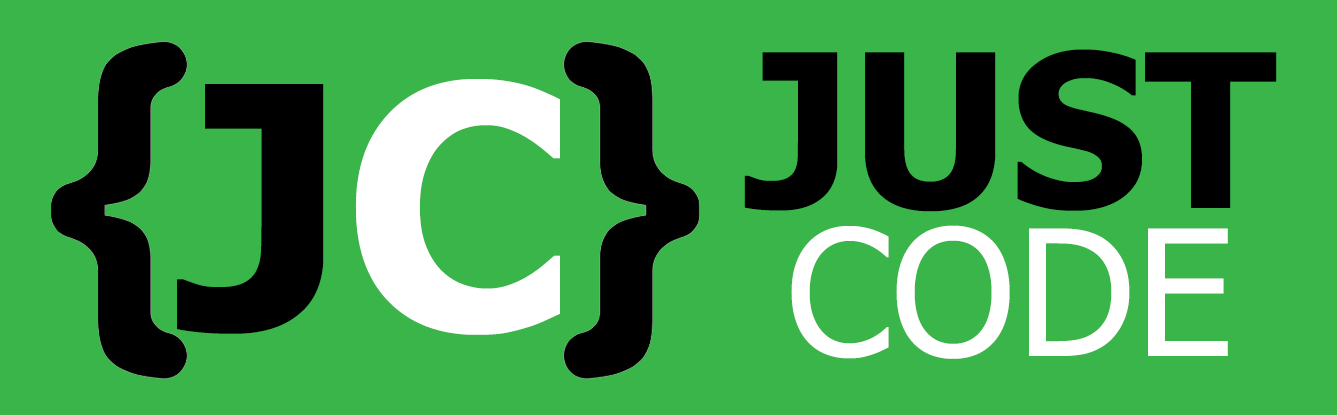
<style>
.page{position:relative;width:1337px;height:415px;background:#3ab54a}
.page>*{position:absolute;margin:0}
.t1{font:214.3px "Tahoma-Bold";color:#000000}
.t2{font:338.6px "Tahoma-Bold";color:#000000}
.t3{font:338.6px "Tahoma-Bold";color:#ffffff}
.t4{font:175.5px "Tahoma";color:#ffffff}
</style>
<div class="page">
<p class="t1" style="left:744px;top:49px;width:533px;height:163px">JUST</p>
<p class="t2" style="left:177px;top:79px;width:383px;height:256px">J<span class="t3">C</span></p>
<p class="t4" style="left:791px;top:225px;width:437px;height:134px">CODE</p>
</div>
